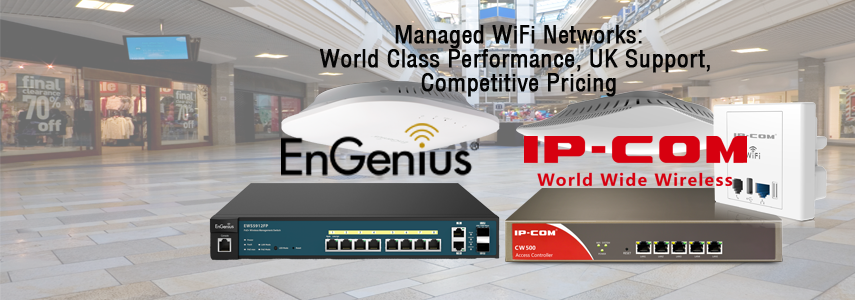
<style>
.page{position:relative;width:855px;height:300px}
.page>*{position:absolute;margin:0}
.t1{font:24px/24px "Helvetica-Condensed";color:#040404;font-weight:bold}
</style>
<div class="page">
<p class="t1" style="left:320px;top:25px;width:390px;height:72px;text-align:center">Managed WiFi Networks:<br>World Class Performance, UK Support, <br>Competitive Pricing</p>
</div>
